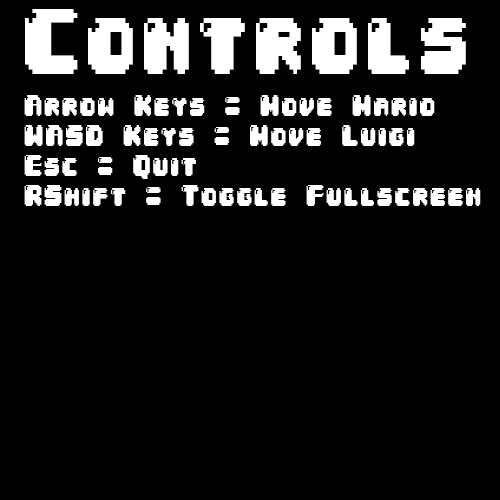
<style>
.page{position:relative;width:500px;height:500px;background:#020000}
.page>*{position:absolute;margin:0}
.t1{font:79.2px "04b30";letter-spacing:0.06em;color:#ffffff;scale:0.8 1}
.t2{font:25px "04b30";letter-spacing:0.06em;color:#ffffff;scale:0.8 1}
</style>
<div class="page">
<p class="t1" style="left:25px;top:9px;width:441px;height:65px">Controls</p>
<p class="t2" style="left:24px;top:95px;width:457px;height:111px">Arrow Keys = Move Mario<br>WASD Keys = Move Luigi<br>Esc = Quit<br>RShift = Toggle Fullscreen</p>
</div>
